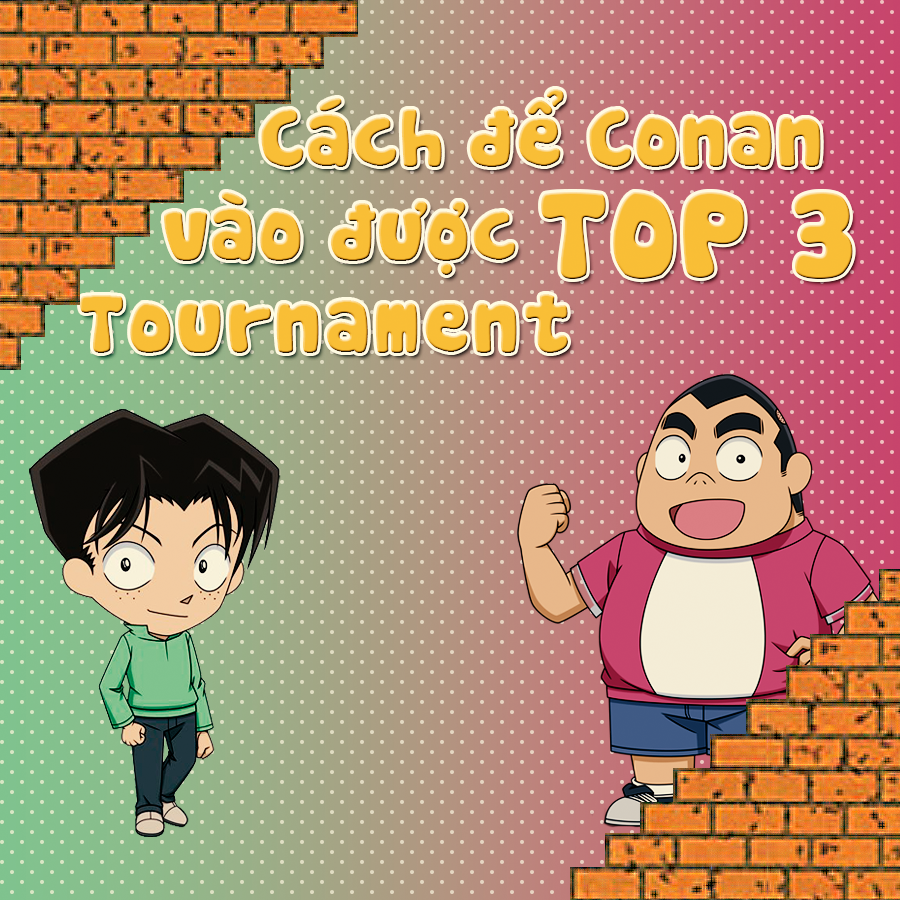
<style>
.page{position:relative;width:900px;height:900px}
.page>*{position:absolute;margin:0}
.t1{font:80px "SVN-Cookies";color:#f5b73e}
.t2{font:120px "SVN-Cookies";color:#f5b73e}
.t3{font:80px "SVN-Cookies";letter-spacing:0.025em;color:#f5b73e}
</style>
<div class="page">
<p class="t1" style="left:261px;top:89px;width:560px;height:78px">Cách để Conan</p>
<p class="t1" style="left:164px;top:192px;width:352px;height:83px">vào được</p>
<p class="t2" style="left:541px;top:192px;width:312px;height:87px">TOP 3</p>
<p class="t3" style="left:80px;top:294px;width:488px;height:59px">Tournament</p>
</div>
